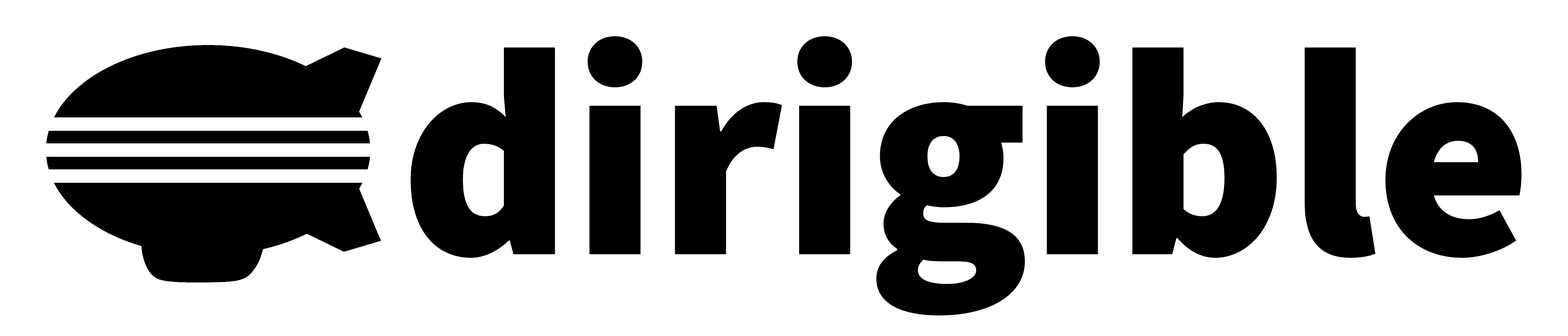
<style>
.page{position:relative;width:1568px;height:336px;background:#ffffff}
.page>*{position:absolute;margin:0}
.t1{font:297px "Assistant-ExtraBold";color:#000000}
</style>
<div class="page">
<p class="t1" style="left:411px;top:36px;width:1111px;height:280px">dirigible</p>
</div>
